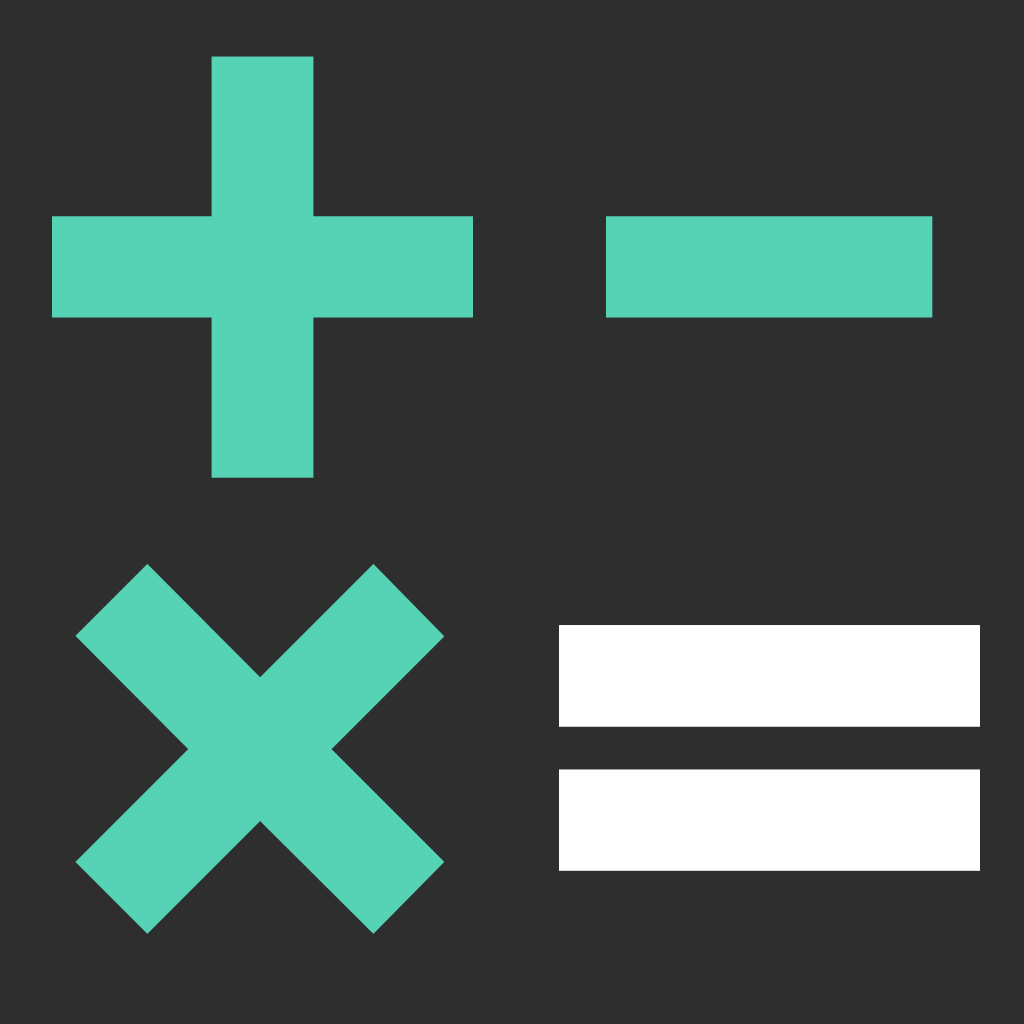
<style>
.page{position:relative;width:1024px;height:1024px;background:#2e2e2e}
.page>*{position:absolute;margin:0}
.t1{font:1000px "CaviarDreams-Bold";letter-spacing:0.025em;color:#56d2b4}
.t2{font:1000px "CaviarDreams-Bold";letter-spacing:0.025em;color:#ffffff}
</style>
<div class="page">
<p class="t1" style="left:52px;top:56px;width:421px;height:422px">+</p>
<p class="t1" style="left:606px;top:216px;width:327px;height:102px">-</p>
<p class="t1" style="left:75px;top:564px;width:370px;height:370px">×</p>
<p class="t2" style="left:559px;top:625px;width:421px;height:246px">=</p>
</div>
